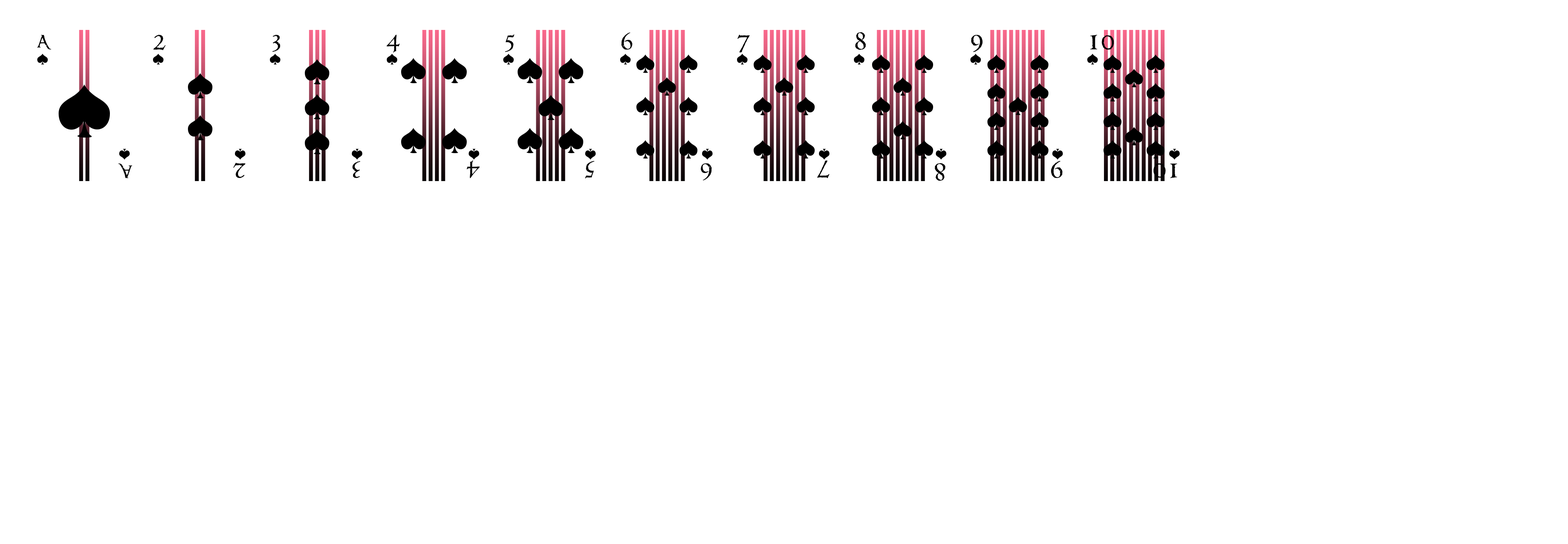
<style>
.page{position:relative;width:1568px;height:544px;background:#ffffff}
.page>*{position:absolute;margin:0}
.t1{font:15.6px "RingbearerMedium";color:#000000}
.t2{font:27.8px "RingbearerMedium";color:#000000}
.t3{font:27.6px "RingbearerMedium";color:#000000}
.t4{font:15.7px "RingbearerMedium";color:#000000}
</style>
<div class="page">
<p class="t1" style="left:37px;top:35px;width:14px;height:15px">A</p>
<p class="t2" style="left:153px;top:35px;width:13px;height:15px">2</p>
<p class="t2" style="left:272px;top:35px;width:8px;height:17px">3</p>
<p class="t2" style="left:386px;top:35px;width:14px;height:18px">4</p>
<p class="t2" style="left:505px;top:34px;width:10px;height:18px">5</p>
<p class="t2" style="left:621px;top:32px;width:12px;height:18px">6</p>
<p class="t2" style="left:737px;top:35px;width:13px;height:18px">7</p>
<p class="t2" style="left:855px;top:32px;width:11px;height:18px">8</p>
<p class="t2" style="left:971px;top:35px;width:12px;height:17px">9</p>
<p class="t2" style="left:1090px;top:35px;width:24px;height:15px">10</p>
<p class="t3" style="left:352px;top:161px;width:8px;height:17px;rotate:180deg">3</p>
<p class="t3" style="left:467px;top:160px;width:13px;height:18px;rotate:180deg">4</p>
<p class="t3" style="left:585px;top:161px;width:10px;height:17px;rotate:180deg">5</p>
<p class="t3" style="left:817px;top:160px;width:12px;height:18px;rotate:180deg">7</p>
<p class="t3" style="left:1051px;top:161px;width:11px;height:17px;rotate:180deg">9</p>
<p class="t4" style="left:118px;top:163px;width:14px;height:15px;rotate:180deg">A</p>
<p class="t3" style="left:233px;top:163px;width:12px;height:15px;rotate:180deg">2</p>
<p class="t3" style="left:701px;top:163px;width:11px;height:18px;rotate:180deg">6</p>
<p class="t3" style="left:935px;top:163px;width:11px;height:18px;rotate:180deg">8</p>
<p class="t3" style="left:1153px;top:163px;width:24px;height:15px;rotate:180deg">10</p>
</div>
